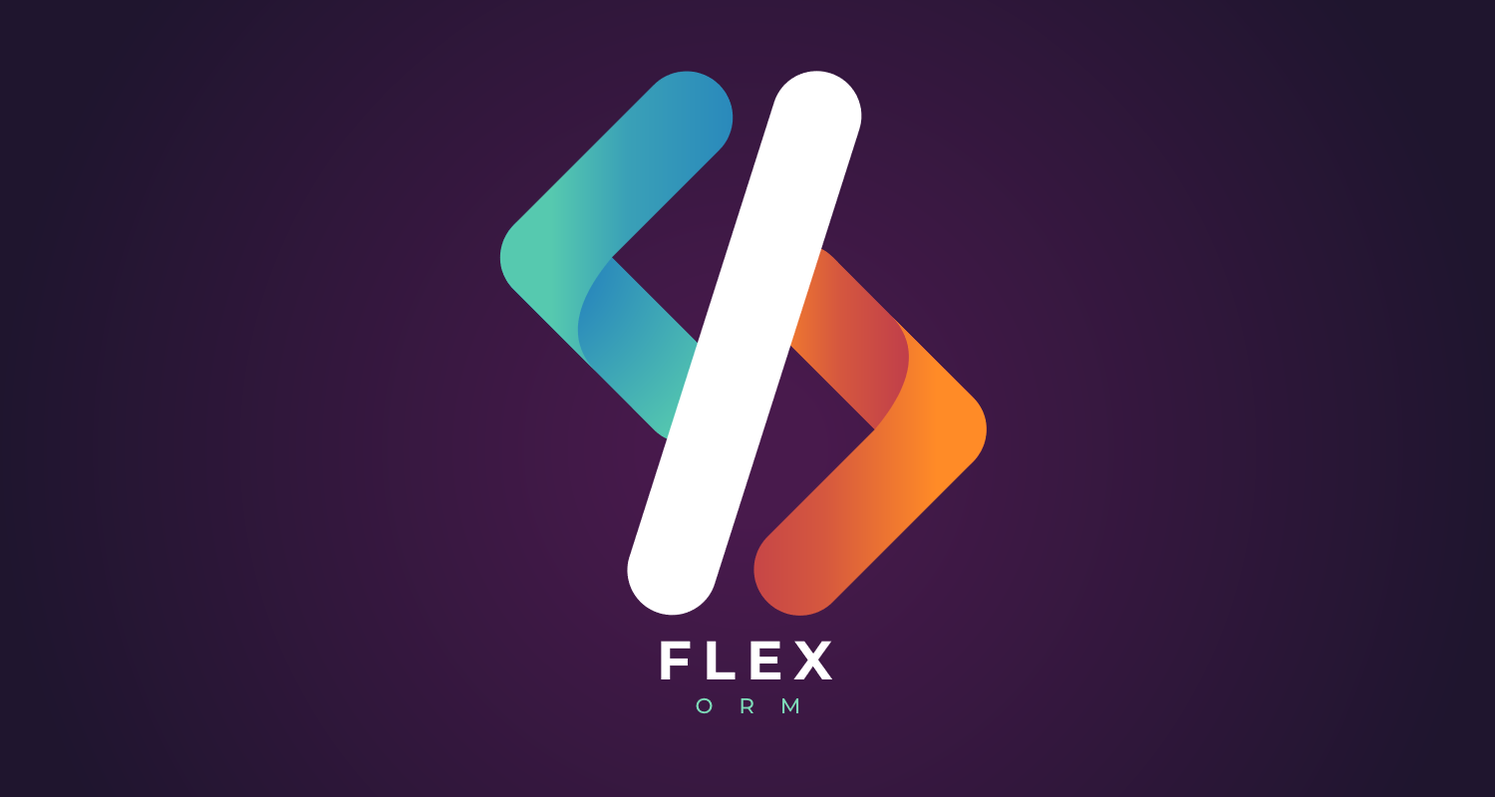
<style>
.page{position:relative;width:1495px;height:797px}
.page>*{position:absolute;margin:0}
.t1{font:54.6px "Montserrat-Bold";letter-spacing:0.2em;color:#ffffff;text-transform:uppercase}
.t2{font:21.4px "Montserrat-Medium";letter-spacing:1.2em;color:#7edcb9;text-transform:uppercase}
</style>
<div class="page">
<p class="t1" style="left:661px;top:641px;width:172px;height:39px">Flex</p>
<p class="t2" style="left:696px;top:698px;width:103px;height:17px">ORM</p>
</div>
